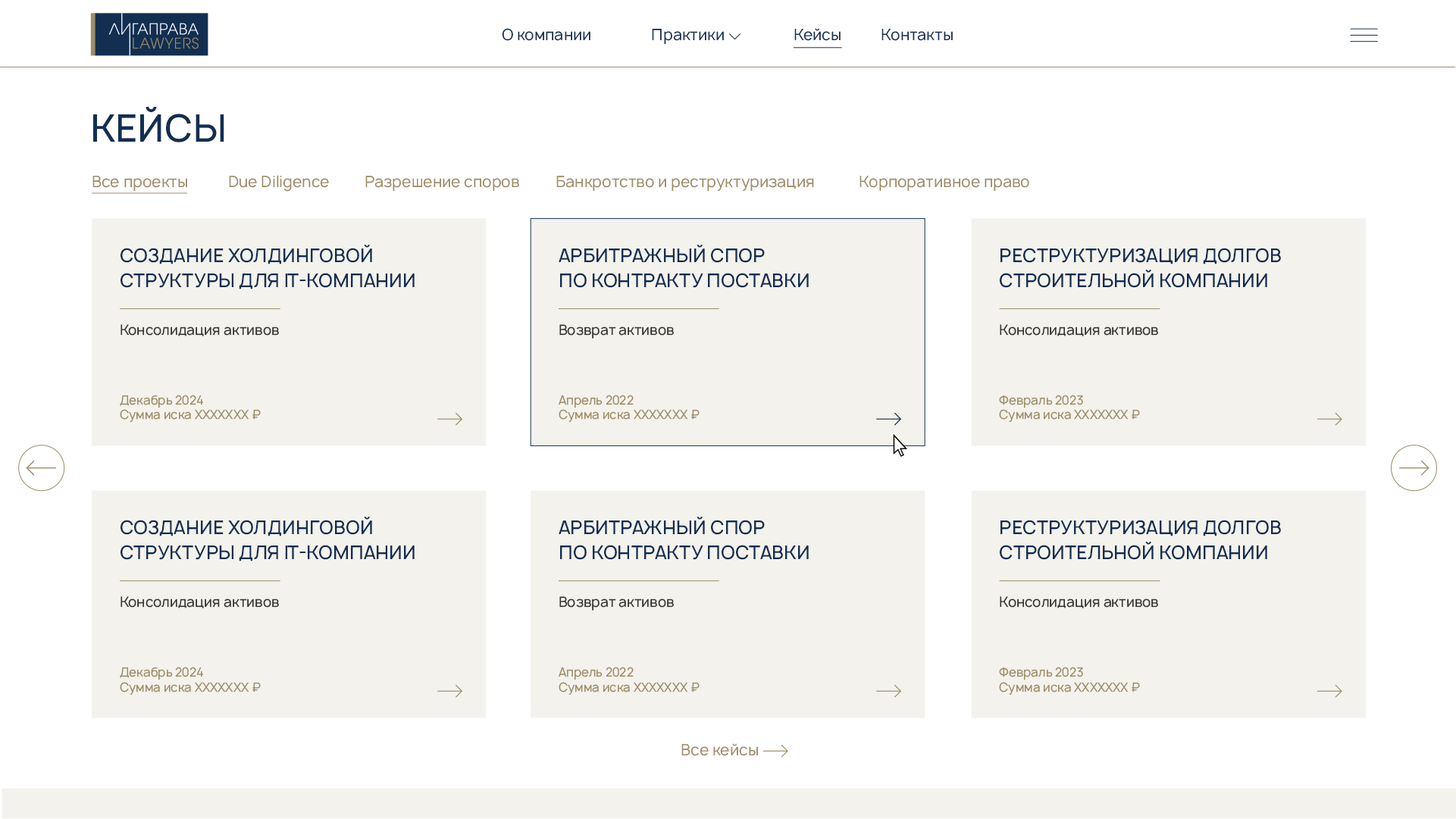
<style>
.page{position:relative;width:1456px;height:819px;background:#ffffff}
.page>*{position:absolute;margin:0}
.t1{font:15.2px "Manrope-Regular";color:#122f52}
.t2{font:36.4px "Manrope-Medium";color:#122f52}
.t3{font:15.2px "Manrope-Regular";color:#9e8d68}
.t4{font:18.2px/25px "Manrope-Medium";color:#122f52}
.t5{font:13.6px "Manrope-Regular";color:#333333}
.t6{font:12.1px "Manrope-Regular";color:#9e8d68}
</style>
<div class="page">
<p class="t1" style="left:502px;top:28px;width:88px;height:13px">О компании</p>
<p class="t1" style="left:652px;top:29px;width:72px;height:15px">Практики</p>
<p class="t1" style="left:794px;top:28px;width:46px;height:13px">Кейсы</p>
<p class="t1" style="left:881px;top:29px;width:72px;height:12px">Контакты</p>
<p class="t2" style="left:93px;top:107px;width:131px;height:35px">КЕЙСЫ</p>
<p class="t3" style="left:92px;top:175px;width:937px;height:17px">Все проекты  Due Diligence  Разрешение споров  Банкротство и реструктуризация   Корпоративное право</p>
<p class="t4" style="left:120px;top:245px;width:295px;height:44px">СОЗДАНИЕ ХОЛДИНГОВОЙ <br>СТРУКТУРЫ ДЛЯ ІТ-КОМПАНИИ</p>
<p class="t4" style="left:558px;top:245px;width:251px;height:43px">АРБИТРАЖНЫЙ СПОР<br>ПО КОНТРАКТУ ПОСТАВКИ</p>
<p class="t4" style="left:1000px;top:248px;width:281px;height:40px">РЕСТРУКТУРИЗАЦИЯ ДОЛГОВ<br>СТРОИТЕЛЬНОЙ КОМПАНИИ</p>
<p class="t5" style="left:120px;top:324px;width:159px;height:12px">Консолидация активов</p>
<p class="t5" style="left:559px;top:324px;width:115px;height:15px">Возврат активов</p>
<p class="t5" style="left:1000px;top:324px;width:158px;height:12px">Консолидация активов</p>
<p class="t6" style="left:120px;top:395px;width:141px;height:28px">Декабрь 2024<br>Сумма иска ХХХХХХХ ₽</p>
<p class="t6" style="left:558px;top:395px;width:141px;height:28px">Апрель 2022<br>Сумма иска ХХХХХХХ ₽</p>
<p class="t6" style="left:999px;top:395px;width:141px;height:28px">Февраль 2023<br>Сумма иска ХХХХХХХ ₽</p>
<p class="t4" style="left:120px;top:517px;width:295px;height:45px">СОЗДАНИЕ ХОЛДИНГОВОЙ <br>СТРУКТУРЫ ДЛЯ ІТ-КОМПАНИИ</p>
<p class="t4" style="left:558px;top:517px;width:251px;height:43px">АРБИТРАЖНЫЙ СПОР<br>ПО КОНТРАКТУ ПОСТАВКИ</p>
<p class="t4" style="left:1000px;top:520px;width:281px;height:40px">РЕСТРУКТУРИЗАЦИЯ ДОЛГОВ<br>СТРОИТЕЛЬНОЙ КОМПАНИИ</p>
<p class="t5" style="left:120px;top:596px;width:159px;height:12px">Консолидация активов</p>
<p class="t5" style="left:559px;top:596px;width:115px;height:15px">Возврат активов</p>
<p class="t5" style="left:1000px;top:596px;width:158px;height:12px">Консолидация активов</p>
<p class="t6" style="left:120px;top:667px;width:141px;height:28px">Декабрь 2024<br>Сумма иска ХХХХХХХ ₽</p>
<p class="t6" style="left:558px;top:667px;width:141px;height:28px">Апрель 2022<br>Сумма иска ХХХХХХХ ₽</p>
<p class="t6" style="left:999px;top:667px;width:141px;height:28px">Февраль 2023<br>Сумма иска ХХХХХХХ ₽</p>
<p class="t3" style="left:681px;top:743px;width:77px;height:13px">Все кейсы</p>
</div>
